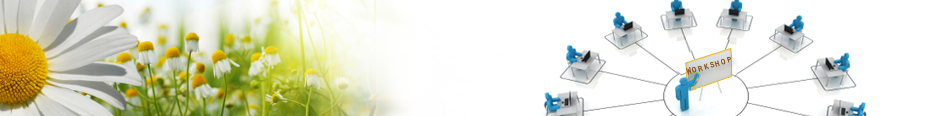
<style>
.page{position:relative;width:928px;height:116px;background:#ffffff}
.page>*{position:absolute;margin:0}
.t1{font:10px "OratorStd";color:#935c26}
</style>
<div class="page">
<p class="t1" style="left:685px;top:56px;width:46px;height:19px;rotate:-17deg">Workshop</p>
</div>
